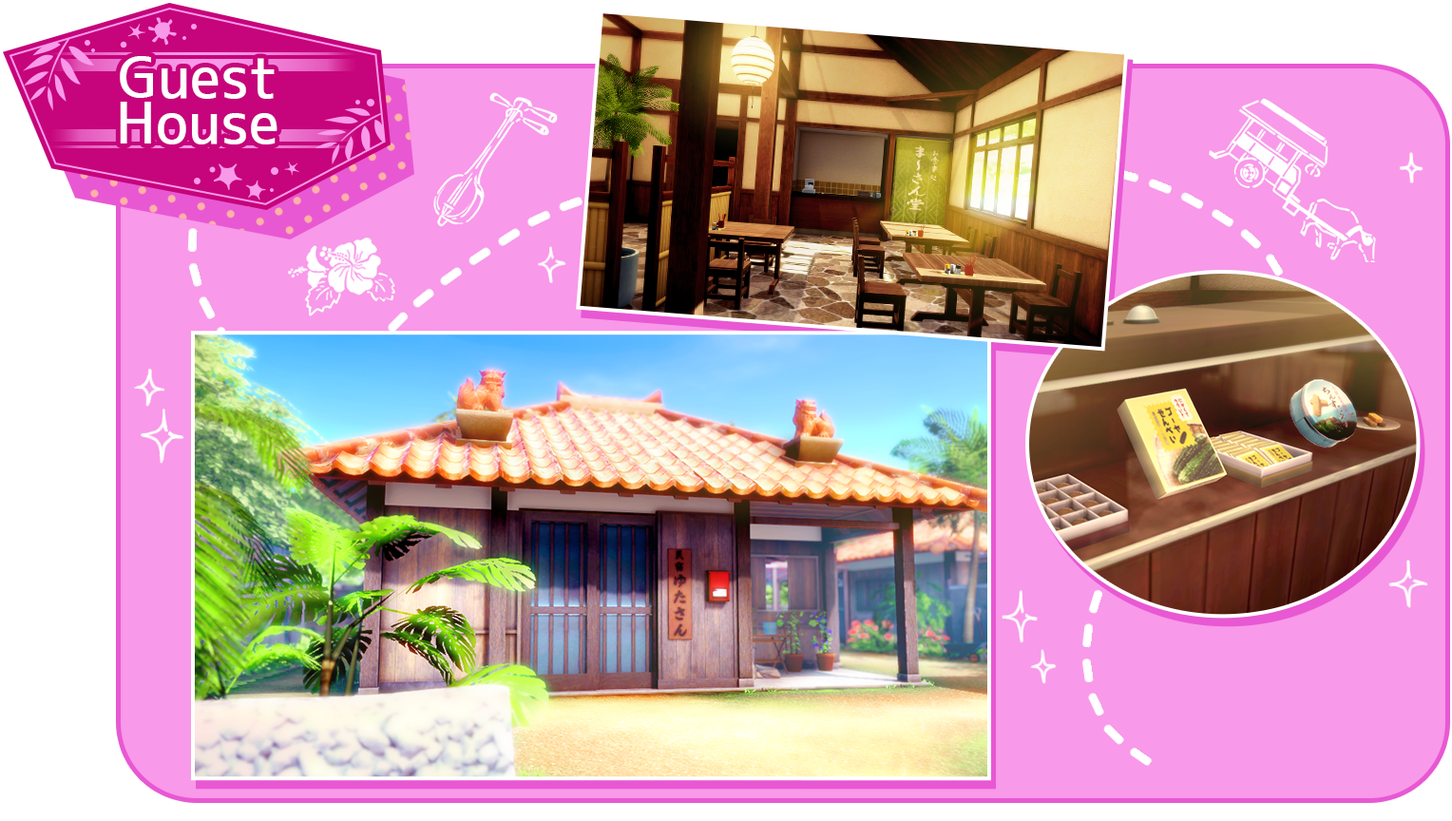
<style>
.page{position:relative;width:1452px;height:821px;background:#f899e9}
.page>*{position:absolute;margin:0}
.t1{font:57px/45.6px "JK-Gothic-M";color:#ffffff}
</style>
<div class="page">
<p class="t1" style="left:120px;top:56px;width:158px;height:88px;text-align:center">Guest<br>House</p>
</div>
